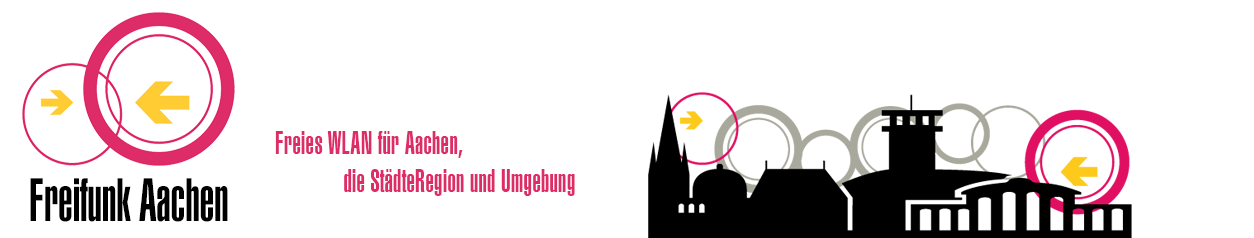
<style>
.page{position:relative;width:1254px;height:238px;background:#ffffff}
.page>*{position:absolute;margin:0}
.t1{font:32px "Swiss911BT-UltraCompressed";letter-spacing:0.015em;color:#de2c68;scale:0.92 1}
.t2{font:59.4px "Swiss911BT-UltraCompressed";color:#000000;scale:0.88 1}
</style>
<div class="page">
<p class="t1" style="left:275px;top:131px;width:300px;height:65px">Freies WLAN für Aachen, <br>             die StädteRegion und Umgebung</p>
<p class="t2" style="left:30px;top:178px;width:198px;height:44px">Freifunk Aachen</p>
</div>
